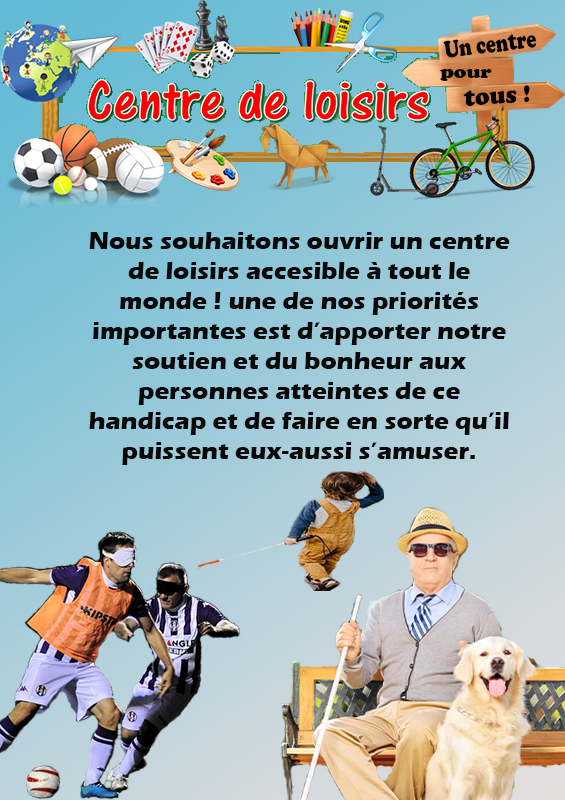
<style>
.page{position:relative;width:565px;height:800px}
.page>*{position:absolute;margin:0}
.t1{font:25px "CooperBlack";color:#000000;scale:0.75 1}
.t2{font:19.4px "CooperBlack";color:#000000;scale:1.07 1}
.t3{font:25px "CooperBlack";color:#000000;scale:0.96 1}
.t4{font:25px "ErasITC-Bold";color:#080808}
</style>
<div class="page">
<p class="t1" style="left:443px;top:34px;width:93px;height:24px;rotate:-7deg">Un centre</p>
<p class="t2" style="left:440px;top:69px;width:52px;height:12px">pour</p>
<p class="t3" style="left:463px;top:85px;width:67px;height:21px;rotate:-3deg">tous !</p>
<p class="t4" style="left:89px;top:232px;width:421px;height:233px;text-align:center">Nous souhaitons ouvrir un centre de loisirs accesible à tout le monde ! une de nos priorités importantes est d’apporter notre soutien et du bonheur aux personnes atteintes de ce handicap et de faire en sorte qu’il puissent eux-aussi s’amuser.</p>
</div>
